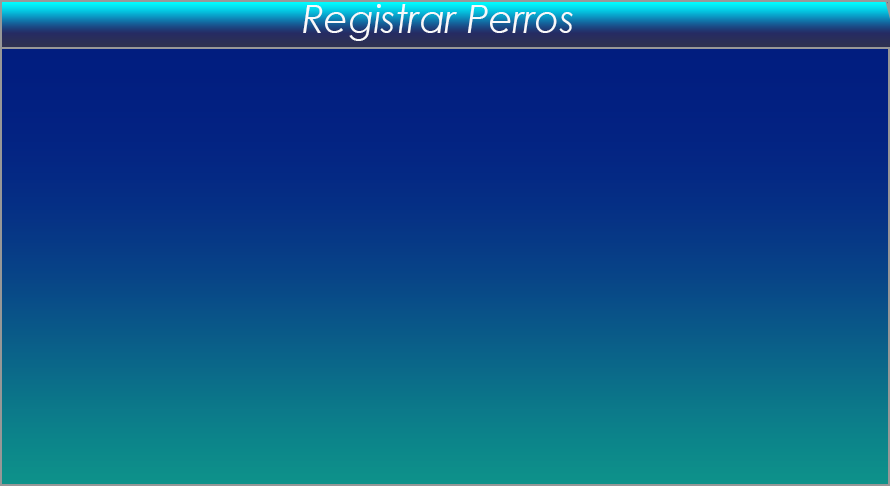
<style>
.page{position:relative;width:890px;height:486px}
.page>*{position:absolute;margin:0}
.t1{font:15.4px "CenturyGothic-Italic";color:#f9f9fa;scale:0.96 1}
</style>
<div class="page">
<p class="t1" style="left:303px;top:4px;width:270px;height:37px">Registrar Perros</p>
</div>
